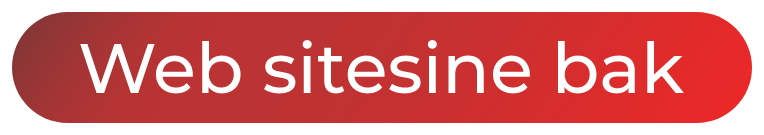
<style>
.page{position:relative;width:764px;height:135px;background:#ffffff}
.page>*{position:absolute;margin:0}
.t1{font:70px "Montserrat-Medium";color:#ffffff}
</style>
<div class="page">
<p class="t1" style="left:80px;top:40px;width:604px;height:54px">Web sitesine bak</p>
</div>
